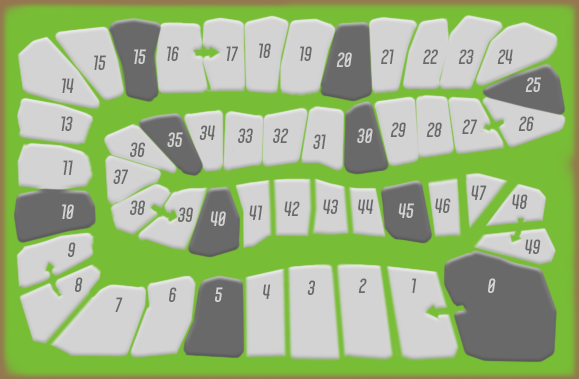
<style>
.page{position:relative;width:579px;height:379px;background:#d3d3d3}
.page>*{position:absolute;margin:0}
.t1{font:18px "AirAmericanaDEMO-BoldItalic";color:#d3d3d3}
.t2{font:18px "AirAmericanaDEMO-BoldItalic";color:#696969}
</style>
<div class="page">
<p class="t1" style="left:134px;top:49px;width:12px;height:15px">15</p>
<p class="t2" style="left:167px;top:46px;width:12px;height:15px">16</p>
<p class="t2" style="left:226px;top:46px;width:12px;height:15px">17</p>
<p class="t2" style="left:259px;top:43px;width:12px;height:15px">18</p>
<p class="t2" style="left:300px;top:46px;width:12px;height:15px">19</p>
<p class="t1" style="left:336px;top:52px;width:16px;height:15px">20</p>
<p class="t2" style="left:381px;top:49px;width:13px;height:15px">21</p>
<p class="t2" style="left:423px;top:49px;width:15px;height:15px">22</p>
<p class="t2" style="left:458px;top:49px;width:16px;height:15px">23</p>
<p class="t2" style="left:497px;top:49px;width:16px;height:15px">24</p>
<p class="t2" style="left:94px;top:55px;width:12px;height:15px">15</p>
<p class="t2" style="left:62px;top:78px;width:12px;height:15px">14</p>
<p class="t1" style="left:525px;top:77px;width:16px;height:15px">25</p>
<p class="t2" style="left:61px;top:116px;width:12px;height:15px">13</p>
<p class="t2" style="left:199px;top:125px;width:16px;height:15px">34</p>
<p class="t2" style="left:390px;top:122px;width:16px;height:15px">29</p>
<p class="t2" style="left:426px;top:122px;width:16px;height:15px">28</p>
<p class="t2" style="left:462px;top:119px;width:15px;height:15px">27</p>
<p class="t2" style="left:518px;top:116px;width:16px;height:15px">26</p>
<p class="t1" style="left:167px;top:132px;width:16px;height:15px">35</p>
<p class="t2" style="left:238px;top:128px;width:15px;height:15px">33</p>
<p class="t2" style="left:273px;top:128px;width:16px;height:15px">32</p>
<p class="t2" style="left:313px;top:134px;width:13px;height:15px">31</p>
<p class="t1" style="left:357px;top:128px;width:16px;height:15px">30</p>
<p class="t2" style="left:130px;top:142px;width:15px;height:15px">36</p>
<p class="t2" style="left:63px;top:160px;width:10px;height:15px">11</p>
<p class="t2" style="left:113px;top:169px;width:15px;height:15px">37</p>
<p class="t2" style="left:471px;top:185px;width:16px;height:15px">47</p>
<p class="t2" style="left:435px;top:198px;width:16px;height:15px">46</p>
<p class="t2" style="left:512px;top:194px;width:16px;height:15px">48</p>
<p class="t1" style="left:62px;top:204px;width:12px;height:15px">10</p>
<p class="t2" style="left:130px;top:200px;width:15px;height:15px">38</p>
<p class="t2" style="left:178px;top:207px;width:15px;height:15px">39</p>
<p class="t2" style="left:249px;top:205px;width:14px;height:15px">41</p>
<p class="t2" style="left:284px;top:201px;width:16px;height:15px">42</p>
<p class="t2" style="left:323px;top:199px;width:15px;height:15px">43</p>
<p class="t2" style="left:358px;top:199px;width:16px;height:15px">44</p>
<p class="t1" style="left:398px;top:203px;width:16px;height:15px">45</p>
<p class="t1" style="left:210px;top:211px;width:16px;height:15px">40</p>
<p class="t2" style="left:68px;top:242px;width:8px;height:15px">9</p>
<p class="t2" style="left:525px;top:239px;width:16px;height:15px">49</p>
<p class="t2" style="left:75px;top:277px;width:8px;height:15px">8</p>
<p class="t2" style="left:307px;top:280px;width:8px;height:15px">3</p>
<p class="t2" style="left:358px;top:278px;width:9px;height:15px">2</p>
<p class="t2" style="left:412px;top:278px;width:5px;height:15px">1</p>
<p class="t1" style="left:488px;top:278px;width:8px;height:15px">0</p>
<p class="t2" style="left:169px;top:287px;width:8px;height:15px">6</p>
<p class="t1" style="left:215px;top:287px;width:8px;height:15px">5</p>
<p class="t2" style="left:263px;top:284px;width:8px;height:15px">4</p>
<p class="t2" style="left:115px;top:297px;width:8px;height:15px">7</p>
</div>
